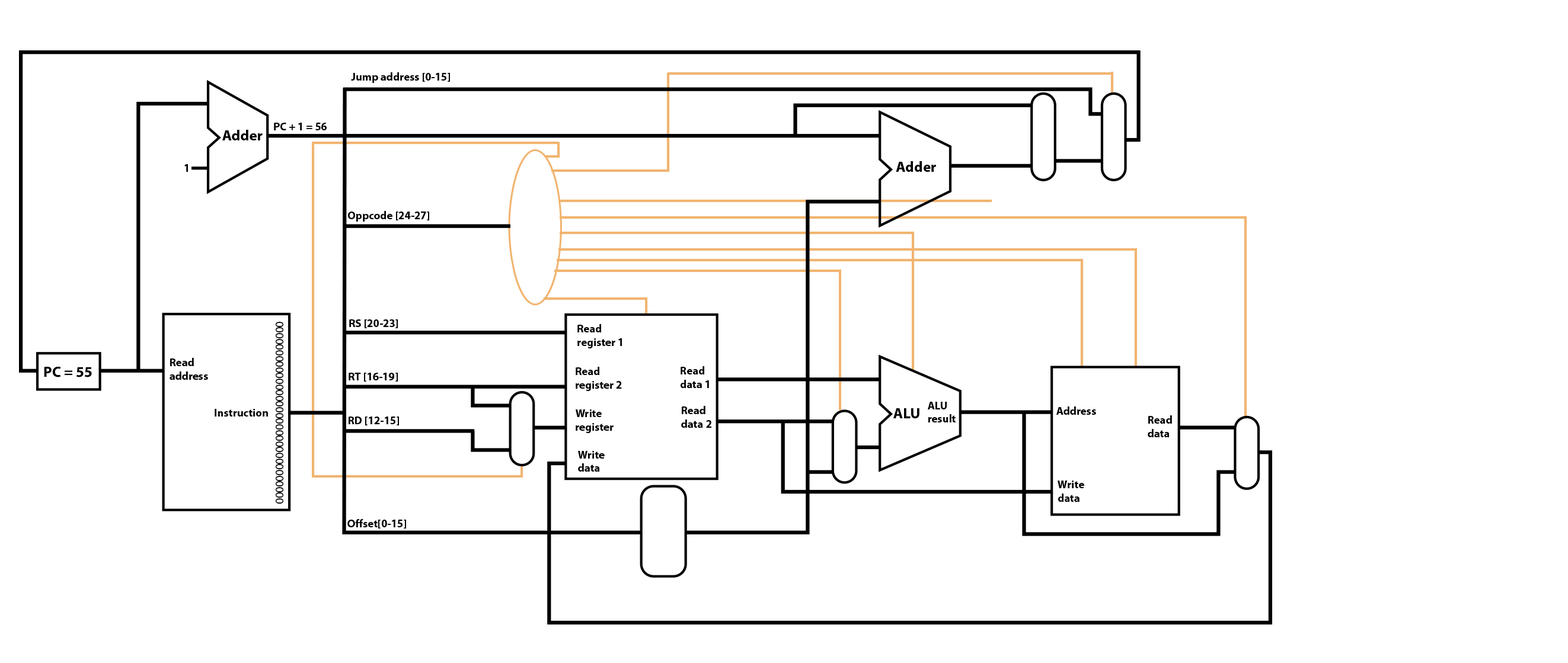
<style>
.page{position:relative;width:1568px;height:663px;background:#ffffff}
.page>*{position:absolute;margin:0}
.t1{font:11.1px "MyriadPro-Bold";color:#000000}
.t2{font:14.8px "MyriadPro-Bold";color:#000000}
.t3{font:11.1px "MyriadPro-Regular";color:#000000}
</style>
<div class="page">
<p class="t1" style="left:351px;top:72px;width:99px;height:11px">Jump address [0-15]</p>
<p class="t1" style="left:274px;top:123px;width:53px;height:7px">PC + 1 = 56</p>
<p class="t2" style="left:222px;top:130px;width:41px;height:10px">Adder</p>
<p class="t2" style="left:896px;top:161px;width:40px;height:11px">Adder</p>
<p class="t1" style="left:184px;top:164px;width:4px;height:8px">1</p>
<p class="t1" style="left:348px;top:211px;width:81px;height:11px">Oppcode [24-27]</p>
<p class="t3" style="left:276px;top:322px;width:7px;height:182px;rotate:-90deg">00000000000000000000000000000000</p>
<p class="t1" style="left:349px;top:320px;width:49px;height:8px">RS [20-23]</p>
<p class="t1" style="left:577px;top:324px;width:45px;height:25px">Read<br>register 1</p>
<p class="t1" style="left:170px;top:358px;width:38px;height:22px">Read<br>address</p>
<p class="t1" style="left:349px;top:373px;width:49px;height:9px">RT [16-19]</p>
<p class="t1" style="left:576px;top:367px;width:46px;height:24px">Read<br>register 2</p>
<p class="t1" style="left:681px;top:366px;width:28px;height:22px">Read<br>data 1</p>
<p class="t1" style="left:928px;top:402px;width:28px;height:21px">ALU<br>result</p>
<p class="t1" style="left:215px;top:409px;width:53px;height:8px">Instruction</p>
<p class="t1" style="left:576px;top:410px;width:38px;height:23px">Write<br>register</p>
<p class="t1" style="left:681px;top:406px;width:30px;height:22px">Read<br>data 2</p>
<p class="t2" style="left:893px;top:408px;width:26px;height:11px">ALU</p>
<p class="t1" style="left:1056px;top:407px;width:40px;height:8px">Address</p>
<p class="t1" style="left:349px;top:417px;width:50px;height:9px">RD [12-15]</p>
<p class="t1" style="left:1148px;top:416px;width:24px;height:21px">Read<br>data</p>
<p class="t1" style="left:578px;top:451px;width:27px;height:21px">Write<br>data</p>
<p class="t1" style="left:1058px;top:481px;width:26px;height:21px">Write<br>data</p>
<p class="t1" style="left:347px;top:519px;width:59px;height:10px">Offset[0-15]</p>
</div>
